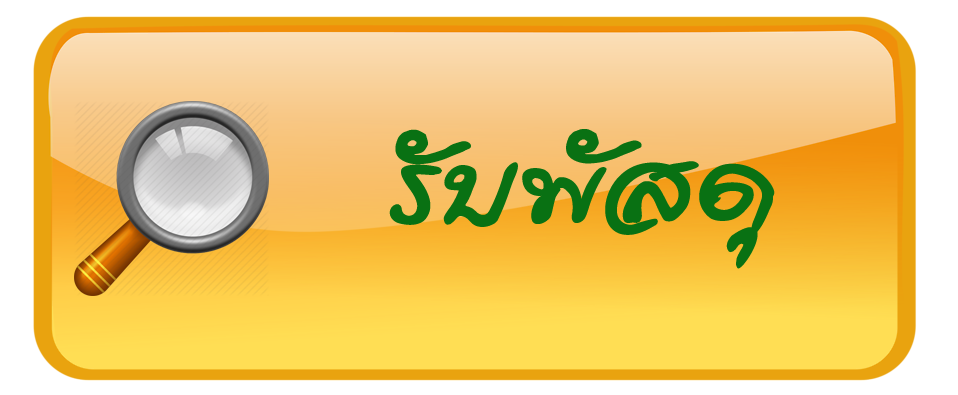
<style>
.page{position:relative;width:958px;height:395px}
.page>*{position:absolute;margin:0}
.t1{font:150px "FontNongnam-Bold";color:#097213}
</style>
<div class="page">
<p class="t1" style="left:389px;top:129px;width:386px;height:140px">รับพัสดุ</p>
</div>
